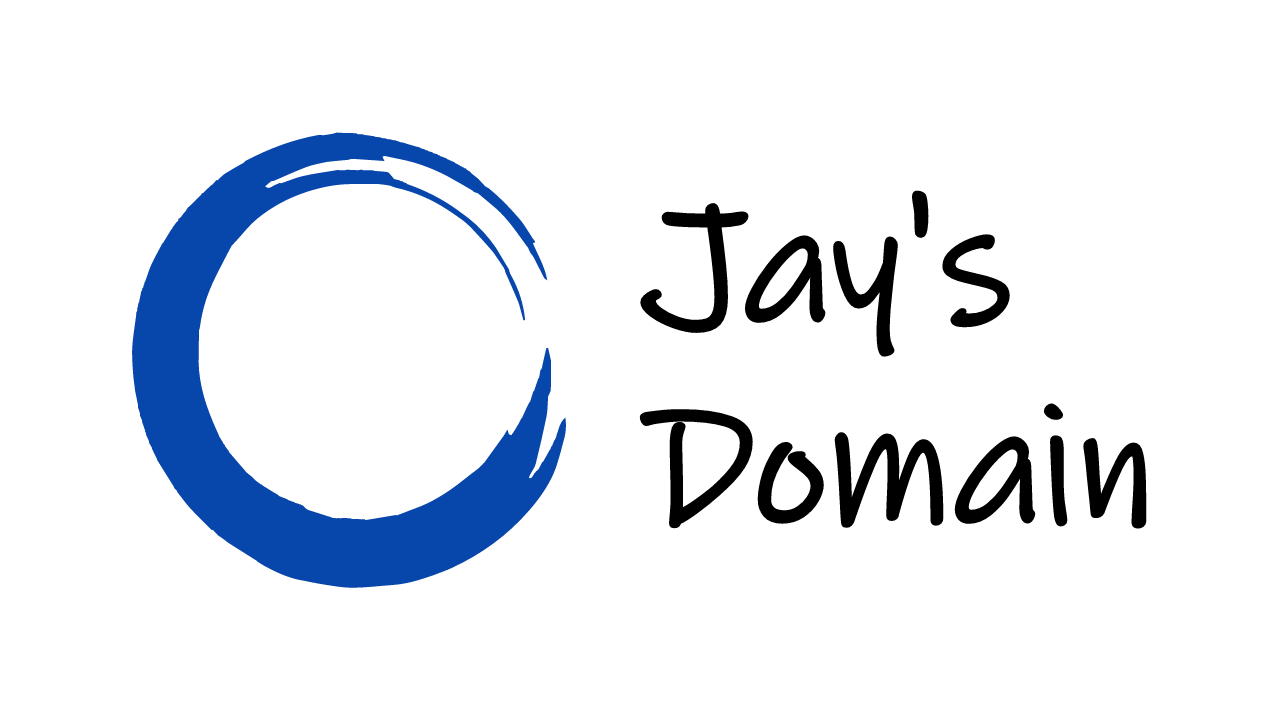
<style>
.page{position:relative;width:1280px;height:720px;background:#ffffff}
.page>*{position:absolute;margin:0}
.t1{font:168px "InkFree";color:#000000}
</style>
<div class="page">
<p class="t1" style="left:639px;top:190px;width:508px;height:340px">Jay's<br>Domain</p>
</div>
